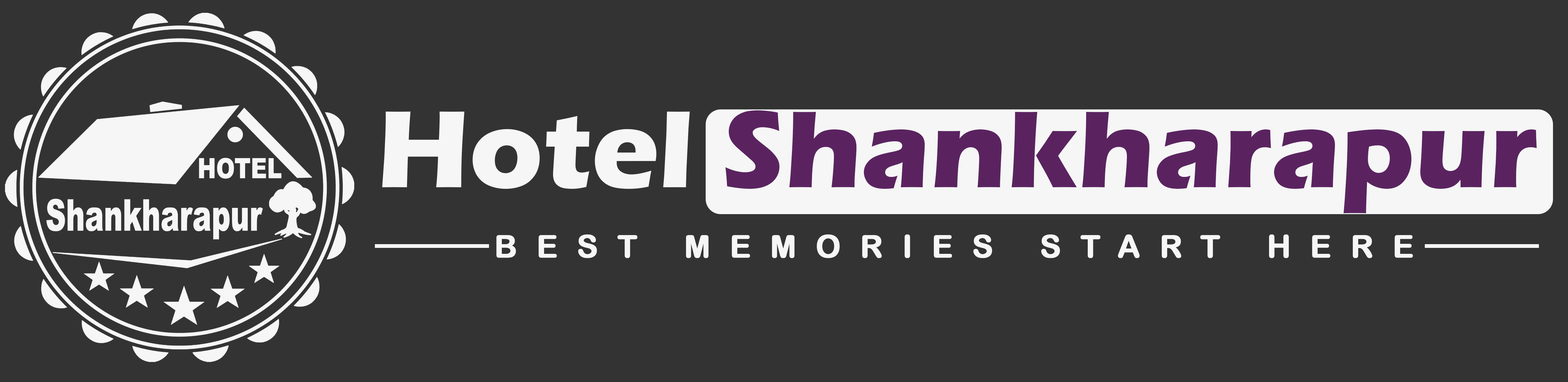
<style>
.page{position:relative;width:1568px;height:382px;background:#333333}
.page>*{position:absolute;margin:0}
.t1{font:113.2px "ErasITC-Bold";color:#5a2360}
.t2{font:113.5px "ErasITC-Bold";color:#f6f6f6}
.t3{font:31.3px "ArialRoundedMTBold";letter-spacing:0.6em;color:#f6f6f6;text-transform:uppercase;font-weight:bold}
</style>
<div class="page">
<p class="t1" style="left:382px;top:110px;width:1155px;height:103px"><span class="t2">Hotel </span>Shankharapur</p>
<p class="t3" style="left:496px;top:234px;width:917px;height:24px">Best Memories start here</p>
</div>
